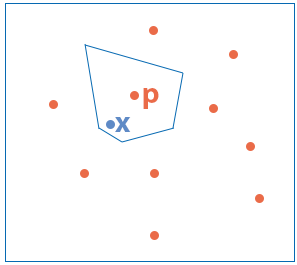
<style>
.page{position:relative;width:297px;height:265px;background:#ffffff}
.page>*{position:absolute;margin:0}
.t1{font:30px "MyriadPro-Bold";color:#ea6b48}
.t2{font:30px "MyriadPro-Bold";color:#5e8ac6}
</style>
<div class="page">
<p class="t1" style="left:143px;top:88px;width:16px;height:21px">p</p>
<p class="t2" style="left:115px;top:117px;width:16px;height:15px">x</p>
</div>
